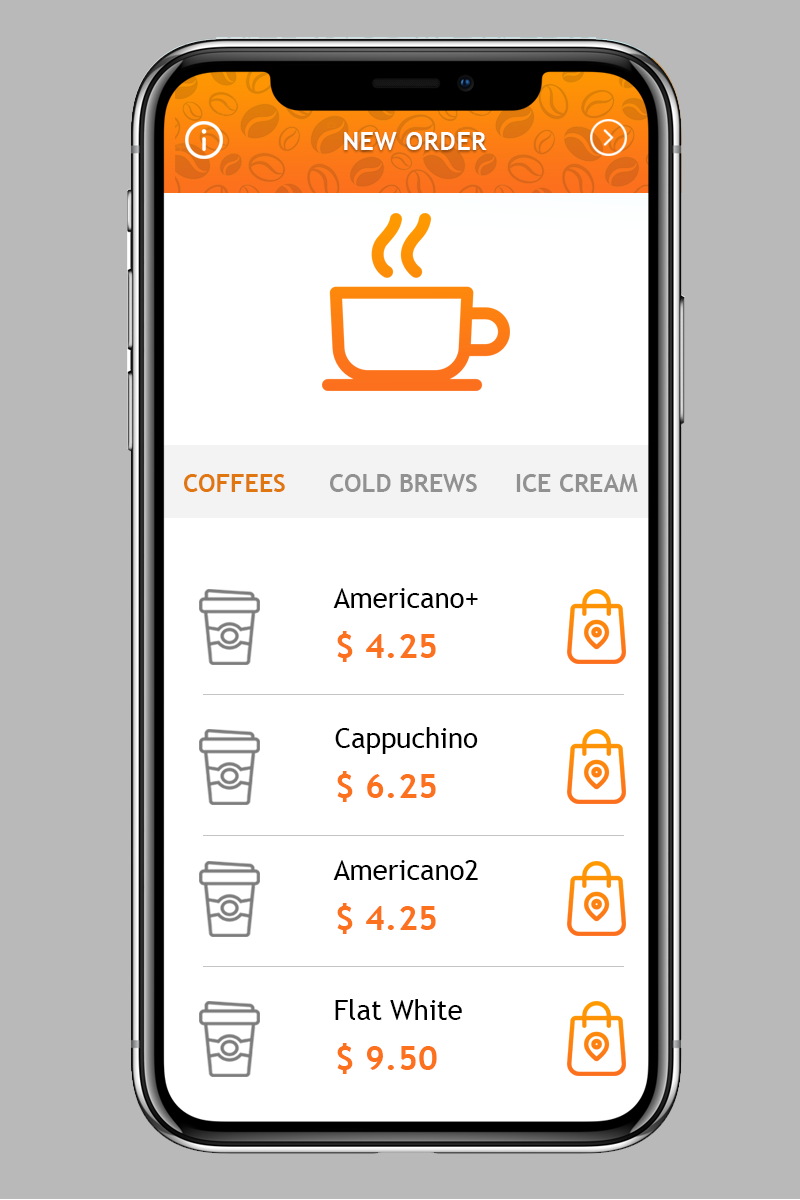
<style>
.page{position:relative;width:800px;height:1200px;background:#ffffff}
.page>*{position:absolute;margin:0}
.t1{font:24.8px "TrebuchetMS-Bold";letter-spacing:0.03em;color:#ffffff;text-transform:uppercase}
.t2{font:24.8px "TrebuchetMS-Bold";color:#e0760f;text-transform:uppercase}
.t3{font:24.8px "TrebuchetMS-Bold";color:#919191;text-transform:uppercase}
.t4{font:27.7px "TrebuchetMS";color:#000000}
.t5{font:34.3px "TrebuchetMS-Bold";color:#fc711d}
</style>
<div class="page">
<p class="t1" style="left:344px;top:132px;width:143px;height:18px">new order</p>
<p class="t2" style="left:184px;top:474px;width:101px;height:18px">Coffees</p>
<p class="t3" style="left:330px;top:474px;width:147px;height:18px">Cold Brews</p>
<p class="t3" style="left:516px;top:474px;width:122px;height:18px">Ice Cream</p>
<p class="t4" style="left:333px;top:588px;width:145px;height:20px">Americano+</p>
<p class="t5" style="left:337px;top:631px;width:99px;height:31px">$ 4.25</p>
<p class="t4" style="left:335px;top:727px;width:143px;height:27px">Cappuchino</p>
<p class="t5" style="left:337px;top:771px;width:99px;height:31px">$ 6.25</p>
<p class="t4" style="left:333px;top:860px;width:145px;height:20px">Americano2</p>
<p class="t5" style="left:337px;top:903px;width:99px;height:31px">$ 4.25</p>
<p class="t4" style="left:335px;top:999px;width:127px;height:21px">Flat White</p>
<p class="t5" style="left:337px;top:1043px;width:100px;height:31px">$ 9.50</p>
</div>
